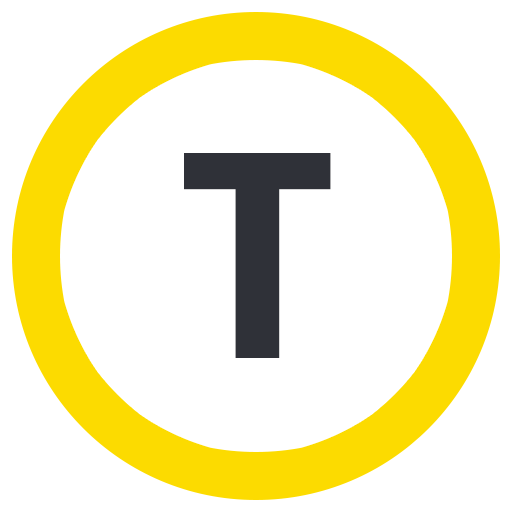
<style>
.page{position:relative;width:512px;height:512px;background:#ffffff}
.page>*{position:absolute;margin:0}
.t1{font:287px "DroidSans-Bold";color:#2f3138}
</style>
<div class="page">
<p class="t1" style="left:184px;top:153px;width:147px;height:205px">T</p>
</div>
